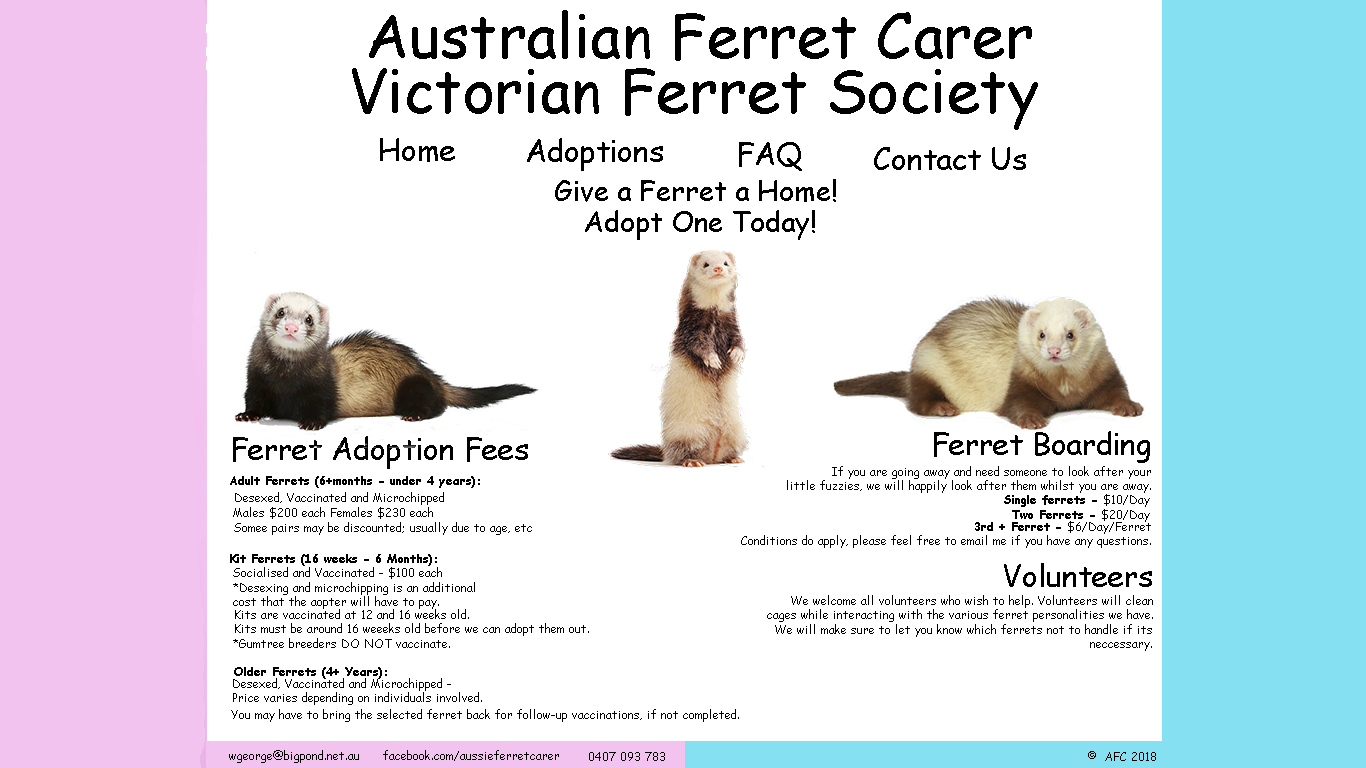
<style>
.page{position:relative;width:1366px;height:768px;background:#ffffff}
.page>*{position:absolute;margin:0}
.t1{font:60px "ComicSansMS";color:#000000}
.t2{font:30px "ComicSansMS";color:#000000}
.t3{font:28px "ComicSansMS";color:#000000}
.t4{font:12px "ComicSansMS";color:#000000}
.t5{font:12px "ComicSansMS-Bold";color:#000000}
</style>
<div class="page">
<p class="t1" style="left:369px;top:10px;width:663px;height:51px">Australian Ferret Carer</p>
<p class="t1" style="left:352px;top:68px;width:686px;height:62px">Victorian Ferret Society</p>
<p class="t2" style="left:380px;top:138px;width:75px;height:24px">Home</p>
<p class="t2" style="left:527px;top:138px;width:136px;height:33px">Adoptions</p>
<p class="t2" style="left:739px;top:142px;width:63px;height:29px">FAQ</p>
<p class="t2" style="left:874px;top:147px;width:152px;height:23px">Contact Us</p>
<p class="t3" style="left:555px;top:179px;width:281px;height:23px">Give a Ferret a Home!</p>
<p class="t3" style="left:585px;top:210px;width:230px;height:30px">Adopt One Today!</p>
<p class="t2" style="left:233px;top:436px;width:295px;height:33px">Ferret Adoption Fees</p>
<p class="t2" style="left:934px;top:431px;width:216px;height:32px">Ferret Boarding</p>
<p class="t4" style="left:787px;top:466px;width:364px;height:27px;text-align:right">If you are going away and need someone to look after your<br>little fuzzies, we will happily look after them whilst you are away.</p>
<p class="t5" style="left:230px;top:476px;width:250px;height:12px">Adult Ferrets (6+months - under 4 years):</p>
<p class="t4" style="left:235px;top:492px;width:209px;height:13px">Desexed, Vaccinated and Microchipped</p>
<p class="t5" style="left:1004px;top:494px;width:146px;height:13px">Single ferrets - <span class="t4">$10/Day</span></p>
<p class="t4" style="left:233px;top:507px;width:200px;height:12px">Males $200 each Females $230 each</p>
<p class="t5" style="left:1012px;top:509px;width:138px;height:13px">Two Ferrets - <span class="t4">$20/Day</span></p>
<p class="t5" style="left:975px;top:521px;width:176px;height:13px">3rd + Ferret - <span class="t4">$6/Day/Ferret</span></p>
<p class="t4" style="left:234px;top:522px;width:298px;height:13px">Somee pairs may be discounted; usually due to age, etc</p>
<p class="t4" style="left:741px;top:535px;width:410px;height:13px">Conditions do apply, please feel free to email me if you have any questions.</p>
<p class="t5" style="left:230px;top:554px;width:207px;height:12px">Kit Ferrets (16 weeks - 6 Months):</p>
<p class="t4" style="left:233px;top:567px;width:209px;height:12px">Socialised and Vaccinated - $100 each</p>
<p class="t2" style="left:1004px;top:563px;width:148px;height:24px">Volunteers</p>
<p class="t4" style="left:233px;top:582px;width:242px;height:27px">*Desexing and microchipping is an additional<br>cost that the aopter will have to pay.</p>
<p class="t4" style="left:767px;top:595px;width:386px;height:27px;text-align:right">We welcome all volunteers who wish to help. Volunteers will clean<br>cages while interacting with the various ferret personalities we have.</p>
<p class="t4" style="left:235px;top:609px;width:354px;height:27px">Kits are vaccinated at 12 and 16 weeks old.<br>Kits must be around 16 weeeks old before we can adopt them out.</p>
<p class="t4" style="left:775px;top:624px;width:377px;height:27px;text-align:right">We will make sure to let you know which ferrets not to handle if its<br>neccessary.</p>
<p class="t4" style="left:233px;top:638px;width:217px;height:10px">*Gumtree breeders DO NOT vaccinate.</p>
<p class="t4" style="left:233px;top:678px;width:249px;height:27px">Desexed, Vaccinated and Microchipped - <br>Price varies depending on individuals involved.</p>
<p class="t5" style="left:234px;top:667px;width:153px;height:12px">Older Ferrets (4+ Years):</p>
<p class="t4" style="left:231px;top:709px;width:508px;height:13px">You may have to bring the selected ferret back for follow-up vaccinations, if not completed.</p>
<p class="t4" style="left:229px;top:750px;width:130px;height:13px">wgeorge@bigpond.net.au</p>
<p class="t4" style="left:383px;top:750px;width:176px;height:11px">facebook.com/aussieferretcarer</p>
<p class="t4" style="left:589px;top:752px;width:76px;height:9px">0407 093 783</p>
<p class="t4" style="left:1088px;top:751px;width:68px;height:10px">©  AFC 2018</p>
</div>
